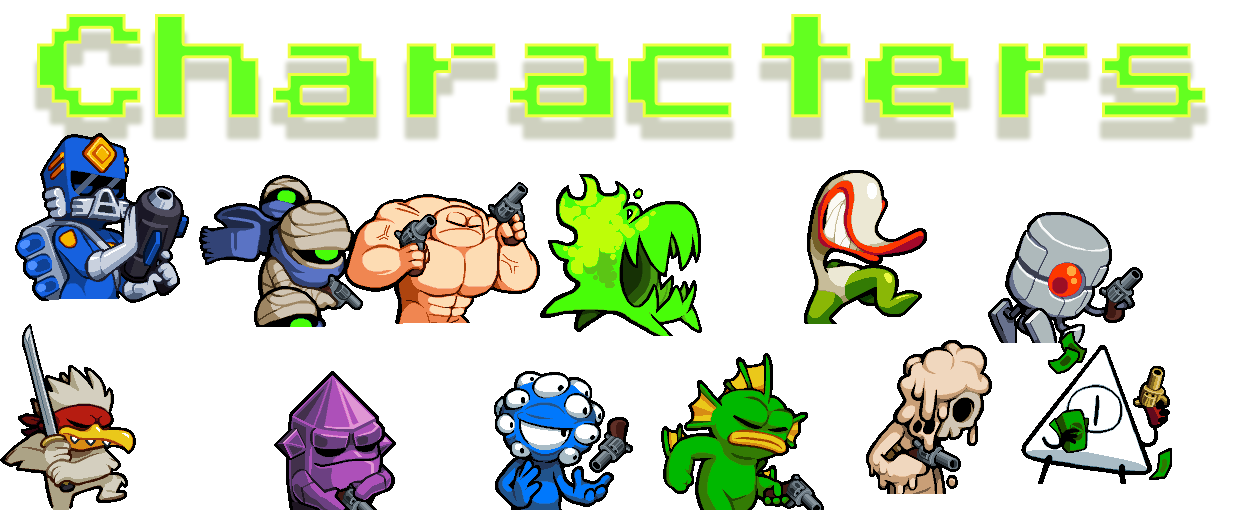
<style>
.page{position:relative;width:1242px;height:510px;background:#ffffff}
.page>*{position:absolute;margin:0}
.t1{font:118.3px "PressStart2P";color:#63ff20}
</style>
<div class="page">
<p class="t1" style="left:37px;top:14px;width:1169px;height:104px">Characters</p>
</div>
